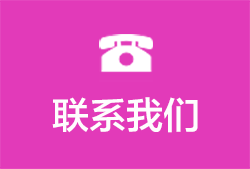
<style>
.page{position:relative;width:250px;height:169px;background:#e23ab9}
.page>*{position:absolute;margin:0}
.t1{font:37.3px "FZLTZHK--GBK1-0";color:#fefdfe}
</style>
<div class="page">
<p class="t1" style="left:52px;top:97px;width:146px;height:36px">联系我们</p>
</div>
